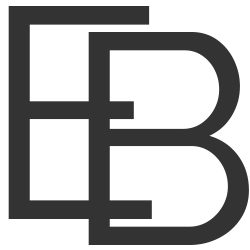
<style>
.page{position:relative;width:250px;height:250px;background:#ffffff}
.page>*{position:absolute;margin:0}
.t1{font:300px "RalewayRoman-Regular";letter-spacing:-0.05em;color:#333333}
</style>
<div class="page">
<p class="t1" style="left:8px;top:6px;width:144px;height:213px">E</p>
<p class="t1" style="left:88px;top:32px;width:161px;height:213px">B</p>
</div>
